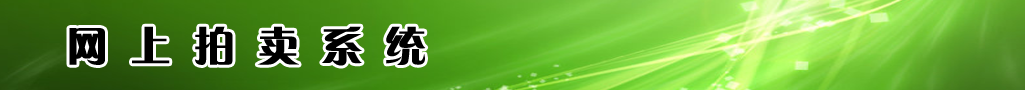
<style>
.page{position:relative;width:1025px;height:90px}
.page>*{position:absolute;margin:0}
.t1{font:40px "FZCQJW--GB1-0";letter-spacing:0.12em;color:#000000;font-weight:bold}
</style>
<div class="page">
<p class="t1" style="left:69px;top:26px;width:357px;height:40px">网 上 拍 卖 系 统</p>
</div>
